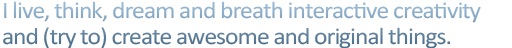
<style>
.page{position:relative;width:512px;height:48px;background:#ffffff}
.page>*{position:absolute;margin:0}
.t1{font:23.8px "Calibri";letter-spacing:-0.04em;scale:1.07 1}
</style>
<div class="page">
<p class="t1" style="left:3px;top:1px;width:478px;height:48px">I live, think, dream and breath interactive creativity <br>and (try to) create awesome and original things.</p>
</div>
